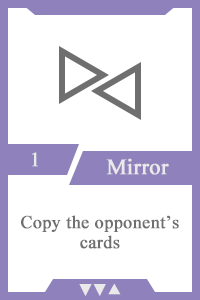
<style>
.page{position:relative;width:200px;height:300px;background:#ffffff}
.page>*{position:absolute;margin:0}
.t1{font:20px "TimesNewRomanPSMT";color:#e9e9e9;font-weight:bold}
.t2{font:22px "TimesNewRomanPSMT";color:#e9e9e9;font-weight:bold}
.t3{font:18px/20px "TimesNewRomanPSMT";color:#6f6f6f;font-weight:bold}
.t4{font:14px "AdobeHeitiStd-Regular";color:#e9e9e9;font-weight:bold}
</style>
<div class="page">
<p class="t1" style="left:32px;top:152px;width:6px;height:15px">1</p>
<p class="t2" style="left:106px;top:158px;width:63px;height:17px">Mirror</p>
<p class="t3" style="left:21px;top:215px;width:158px;height:34px;text-align:center">Copy the opponent’s cards</p>
<p class="t4" style="left:79px;top:284px;width:42px;height:12px">▼▼▲</p>
</div>
